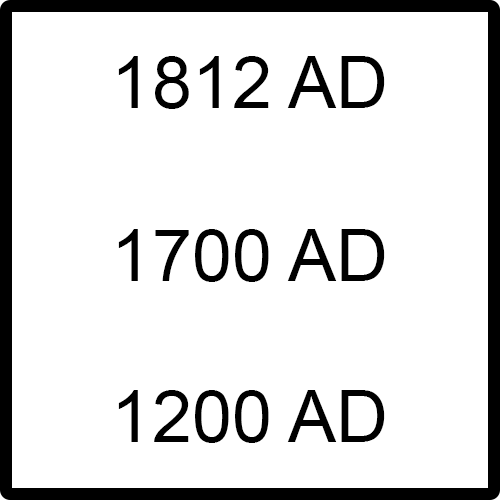
<style>
.page{position:relative;width:500px;height:500px;background:#ffffff}
.page>*{position:absolute;margin:0}
.t1{font:72px "ArialMT";color:#000000}
</style>
<div class="page">
<p class="t1" style="left:118px;top:56px;width:267px;height:53px">1812 AD</p>
<p class="t1" style="left:118px;top:229px;width:267px;height:53px">1700 AD</p>
<p class="t1" style="left:118px;top:390px;width:267px;height:53px">1200 AD</p>
</div>
